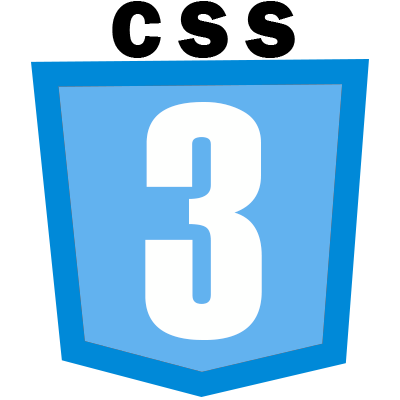
<style>
.page{position:relative;width:400px;height:400px;background:#ffffff}
.page>*{position:absolute;margin:0}
.t1{font:83.3px "FranklinGothic-Heavy";letter-spacing:0.2em;color:#000000}
.t2{font:333.3px "Haettenschweiler";letter-spacing:0.2em;color:#fefffe}
</style>
<div class="page">
<p class="t1" style="left:112px;top:1px;width:183px;height:57px">CSS</p>
<p class="t2" style="left:145px;top:102px;width:117px;height:238px">3</p>
</div>
